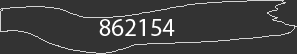
<style>
.page{position:relative;width:297px;height:54px;background:#333333}
.page>*{position:absolute;margin:0}
.t1{font:25px "MyriadPro-Regular";color:#ffffff}
</style>
<div class="page">
<p class="t1" style="left:99px;top:19px;width:76px;height:17px">862154</p>
</div>
